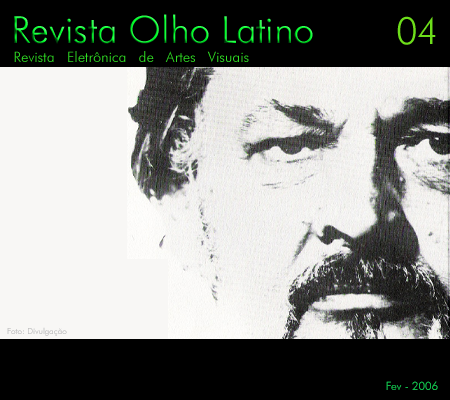
<style>
.page{position:relative;width:450px;height:400px;background:#000000}
.page>*{position:absolute;margin:0}
.t1{font:37.5px "FuturaBT-Light"}
.t2{font:37.5px "FuturaBT-Light";color:#6dde1a}
.t3{font:14.4px "FuturaBT-Light";color:#30df23}
.t4{font:8.3px "FuturaBT-Light";color:#c5c5c5}
.t5{font:11.4px "FuturaBT-Light";color:#11b748}
</style>
<div class="page">
<p class="t1" style="left:14px;top:14px;width:299px;height:30px">Revista Olho Latino</p>
<p class="t2" style="left:397px;top:16px;width:39px;height:29px">04</p>
<p class="t3" style="left:14px;top:51px;width:235px;height:11px">Revista   Eletrônica   de   Artes   Visuais</p>
<p class="t4" style="left:7px;top:327px;width:60px;height:9px">Foto: Divulgação</p>
<p class="t5" style="left:386px;top:381px;width:52px;height:9px">Fev - 2006</p>
</div>
